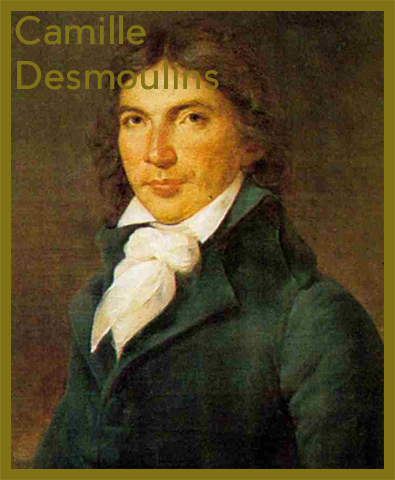
<style>
.page{position:relative;width:395px;height:480px}
.page>*{position:absolute;margin:0}
.t1{font:37.3px "PierSans";color:#807215}
</style>
<div class="page">
<p class="t1" style="left:15px;top:15px;width:204px;height:75px">Camille<br>Desmoulins</p>
</div>
